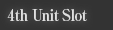
<style>
.page{position:relative;width:113px;height:30px;background:#333333}
.page>*{position:absolute;margin:0}
.t1{font:16px "RyuminPro-ExBold";letter-spacing:-0.04em;color:#dfdfdf;scale:0.9 1}
</style>
<div class="page">
<p class="t1" style="left:7px;top:8px;width:80px;height:13px">4th Unit Slot</p>
</div>
